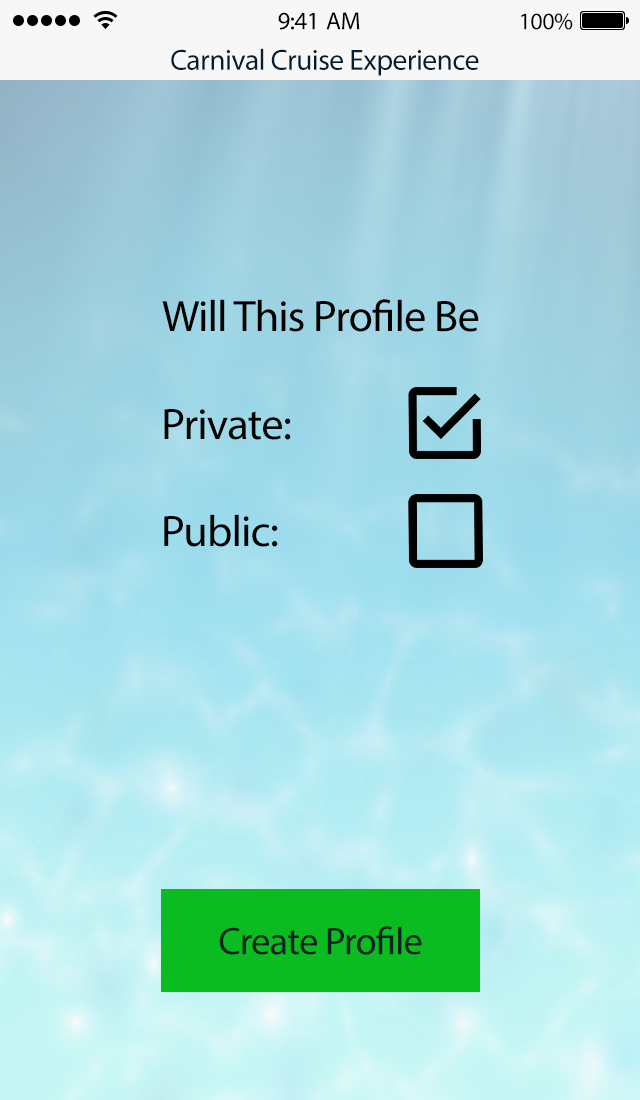
<style>
.page{position:relative;width:640px;height:1100px}
.page>*{position:absolute;margin:0}
.t1{font:25px "MyriadPro-Regular";letter-spacing:-0.02em;color:#000000}
.t2{font:24px "MyriadPro-Regular";letter-spacing:-0.02em;color:#000000}
.t3{font:29.4px "MyriadPro-Regular";letter-spacing:-0.02em;color:#061d30}
.t4{font:44.2px "MyriadPro-Regular";letter-spacing:-0.02em;color:#000000}
.t5{font:38.6px "MyriadPro-Regular";letter-spacing:-0.02em;color:#0a2320}
</style>
<div class="page">
<p class="t1" style="left:278px;top:12px;width:82px;height:18px">9:41 AM</p>
<p class="t2" style="left:521px;top:13px;width:52px;height:17px">100%</p>
<p class="t3" style="left:171px;top:48px;width:308px;height:28px">Carnival Cruise Experience</p>
<p class="t4" style="left:162px;top:299px;width:317px;height:33px">Will This Profile Be</p>
<p class="t4" style="left:164px;top:409px;width:127px;height:31px">Private:</p>
<p class="t4" style="left:164px;top:514px;width:114px;height:33px">Public:</p>
<p class="t5" style="left:219px;top:926px;width:203px;height:29px">Create Profile</p>
</div>
